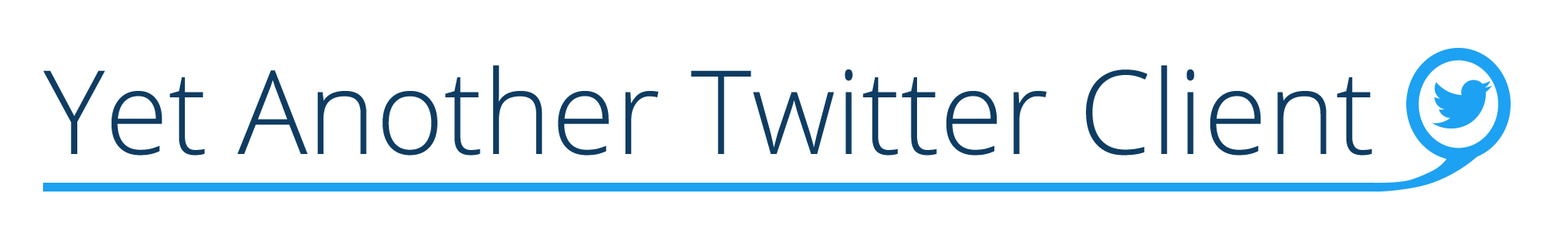
<style>
.page{position:relative;width:1568px;height:229px;background:#ffffff}
.page>*{position:absolute;margin:0}
.t1{font:116.2px "OpenSans-Light";color:#0f3c62}
</style>
<div class="page">
<p class="t1" style="left:43px;top:65px;width:1329px;height:90px">Yet Another Twitter Client</p>
</div>
